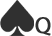
<style>
.page{position:relative;width:52px;height:36px;background:#ffffff}
.page>*{position:absolute;margin:0}
.t1{font:23.4px "MyriadPro-Regular";letter-spacing:-0.1em;color:#303030;font-weight:bold}
</style>
<div class="page">
<p class="t1" style="left:35px;top:17px;width:16px;height:19px">Q</p>
</div>
